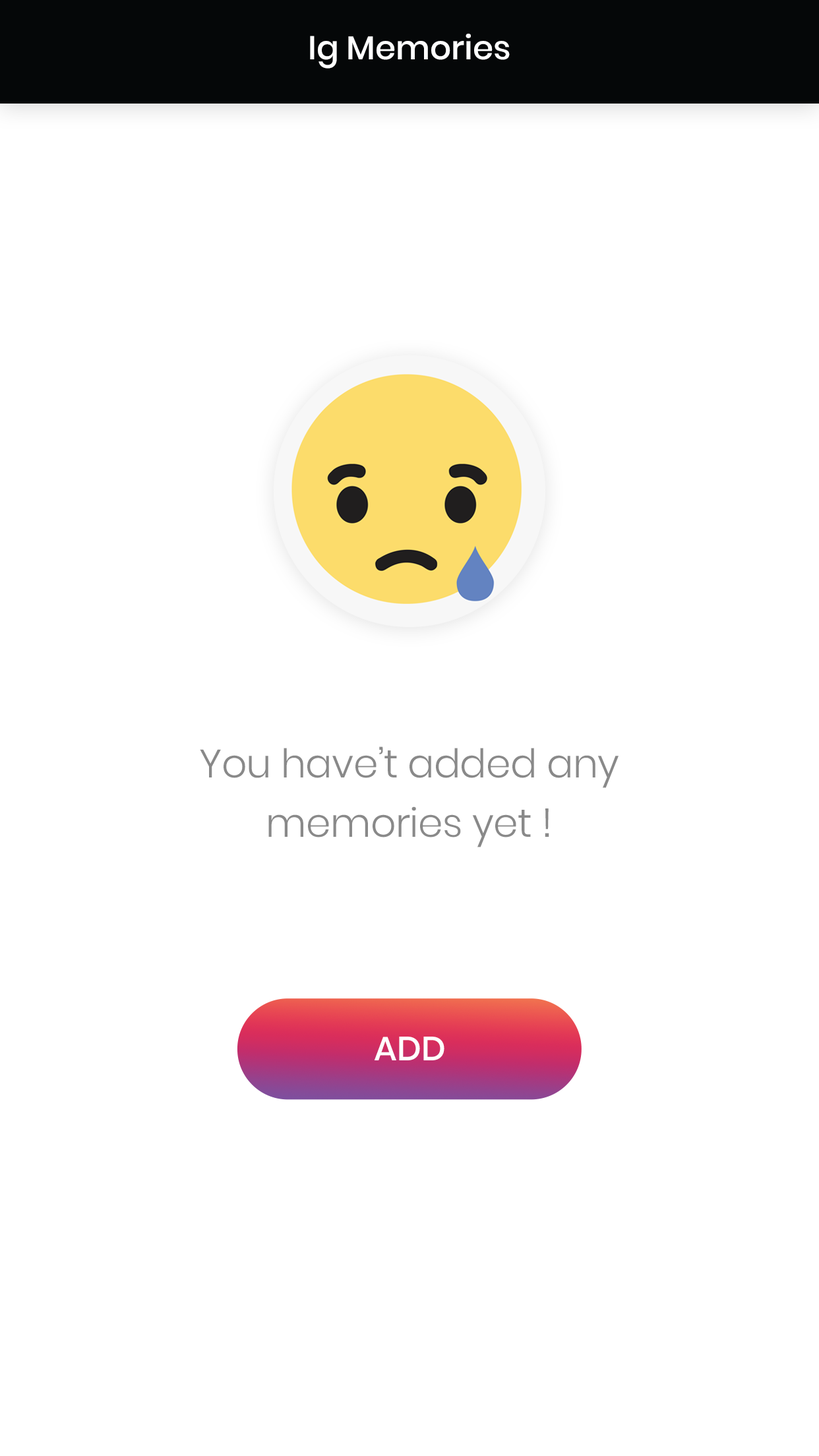
<style>
.page{position:relative;width:819px;height:1456px;background:#ffffff}
.page>*{position:absolute;margin:0}
.t1{font:33px "Poppins-Medium";color:#ffffff}
.t2{font:39.6px/59.3px "Poppins-Light";letter-spacing:-0.01em;color:#898989}
.t3{font:33.6px "Poppins-Medium";color:#ffffff;text-transform:uppercase}
</style>
<div class="page">
<p class="t1" style="left:310px;top:34px;width:200px;height:35px">Ig Memories</p>
<p class="t2" style="left:200px;top:746px;width:419px;height:101px;text-align:center">You have’t added any <br>memories yet !</p>
<p class="t3" style="left:374px;top:1037px;width:70px;height:23px">Add</p>
</div>
